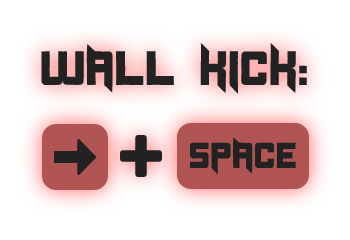
<style>
.page{position:relative;width:350px;height:240px;background:#ffffff}
.page>*{position:absolute;margin:0}
.t1{font:48px "Duplexide";color:#222222}
.t2{font:36px "Duplexide";color:#222222}
</style>
<div class="page">
<p class="t1" style="left:41px;top:43px;width:266px;height:51px">Wall Kick:</p>
<p class="t2" style="left:189px;top:137px;width:107px;height:38px">Space</p>
</div>
